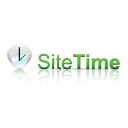
<style>
.page{position:relative;width:128px;height:128px;background:#ffffff}
.page>*{position:absolute;margin:0}
.t1{font:20.7px "ArialMT"}
.t2{font:20.7px "Arial-BoldMT"}
</style>
<div class="page">
<p class="t1" style="left:37px;top:53px;width:83px;height:17px">Site<span class="t2">Time</span></p>
<p class="t1" style="left:37px;top:69px;width:83px;height:16px">Site<span class="t2">Time</span></p>
</div>
